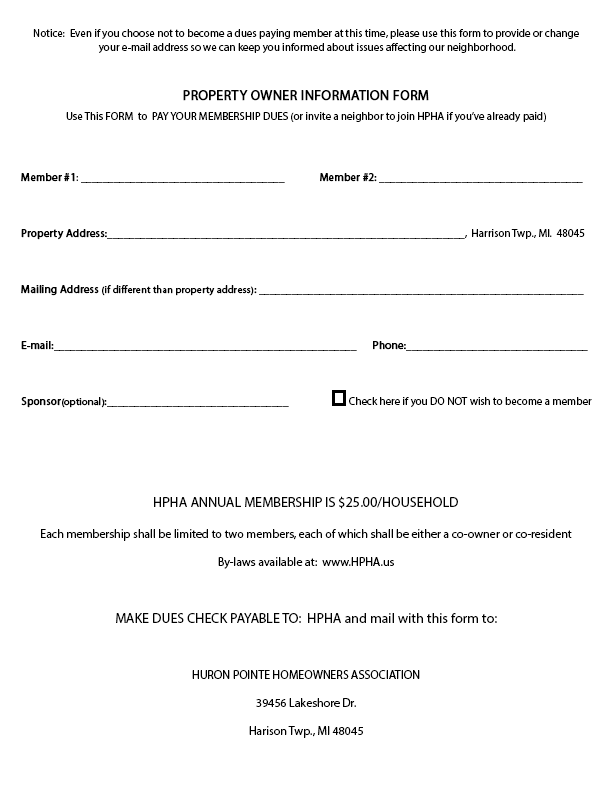
<style>
.page{position:relative;width:612px;height:792px;background:#ffffff}
.page>*{position:absolute;margin:0}
.t1{font:11px/14px "MyriadPro-Regular";color:#000000}
.t2{font:14px "MyriadPro-Regular";color:#000000;font-weight:bold}
.t3{font:11px "MyriadPro-Regular";color:#000000}
.t4{font:11px/14px "MyriadPro-Regular";color:#000000;font-weight:bold}
.t5{font:10px/14px "MyriadPro-Regular";color:#000000;font-weight:bold}
.t6{font:14px "MyriadPro-Regular";color:#000000}
.t7{font:12px/14px "MyriadPro-Regular";color:#000000}
.t8{font:14px/14px "MyriadPro-Regular";color:#000000}
</style>
<div class="page">
<p class="t1" style="left:33px;top:29px;width:546px;height:24px;text-align:center">Notice:  Even if you choose not to become a dues paying member at this time, please use this form to provide or change<br> your e-mail address so we can keep you informed about issues affecting our neighborhood.</p>
<p class="t2" style="left:183px;top:90px;width:246px;height:11px">PROPERTY OWNER INFORMATION FORM</p>
<p class="t3" style="left:66px;top:112px;width:480px;height:10px">Use This FORM  to  PAY YOUR MEMBERSHIP DUES (or invite a neighbor to join HPHA if you’ve already paid)</p>
<p class="t1" style="left:21px;top:173px;width:571px;height:235px"><span class="t4">Member #1</span>­­: _____________________________________               <span class="t4">Member #2: </span>_____________________________________<br><br> <br><br><span class="t4">Property Address:</span>_________________________________________________________________,  Harrison Twp., MI.  48045<br><br> <br><br><span class="t4">Mailing Address </span><span class="t5">(if different than property address)</span><span class="t4">:</span> ___________________________________________________________   <br><br> <br><br><span class="t4">E-mail:</span>_______________________________________________________       <span class="t4">Phone:</span>_________________________________<br><br> <br><br><span class="t4">Sponsor</span><span class="t5">(optional)</span><span class="t4">:</span>_________________________________                          Check here if you DO NOT wish to become a member</p>
<p class="t6" style="left:154px;top:496px;width:304px;height:13px">HPHA ANNUAL MEMBERSHIP IS $25.00/HOUSEHOLD</p>
<p class="t7" style="left:41px;top:529px;width:531px;height:40px;text-align:center">Each membership shall be limited to two members, each of which shall be either a co-owner or co-resident<br><br>By-laws available at:  www.HPHA.us</p>
<p class="t7" style="left:116px;top:613px;width:381px;height:125px;text-align:center"><span class="t8">MAKE DUES CHECK PAYABLE TO:  HPHA and mail with this form to:<br><br> <br></span><br>HURON POINTE HOMEOWNERS ASSOCIATION<br><br>39456 Lakeshore Dr.<br><br>Harison Twp., MI 48045</p>
</div>
